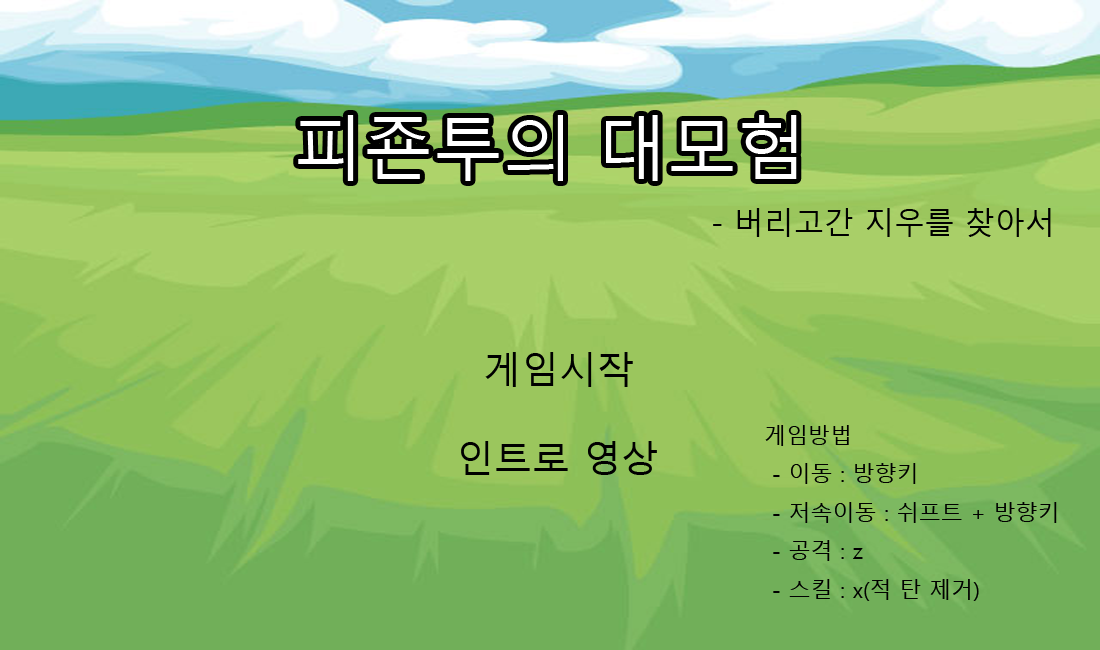
<style>
.page{position:relative;width:1100px;height:650px}
.page>*{position:absolute;margin:0}
.t1{font:70px "MalgunGothic";color:#ffffff}
.t2{font:30px "MalgunGothic";color:#000000}
.t3{font:38px "MalgunGothic";color:#000000}
.t4{font:22px "MalgunGothic";color:#000000}
</style>
<div class="page">
<p class="t1" style="left:298px;top:115px;width:499px;height:66px">피죤투의 대모험</p>
<p class="t2" style="left:713px;top:208px;width:338px;height:29px">- 버리고간 지우를 찾아서</p>
<p class="t3" style="left:485px;top:352px;width:148px;height:35px">게임시작</p>
<p class="t4" style="left:765px;top:425px;width:292px;height:176px">게임방법<br> - 이동 : 방향키<br> - 저속이동 : 쉬프트 + 방향키<br> - 공격 : z<br> - 스킬 : x(적 탄 제거)</p>
<p class="t3" style="left:461px;top:441px;width:196px;height:34px">인트로 영상</p>
</div>
